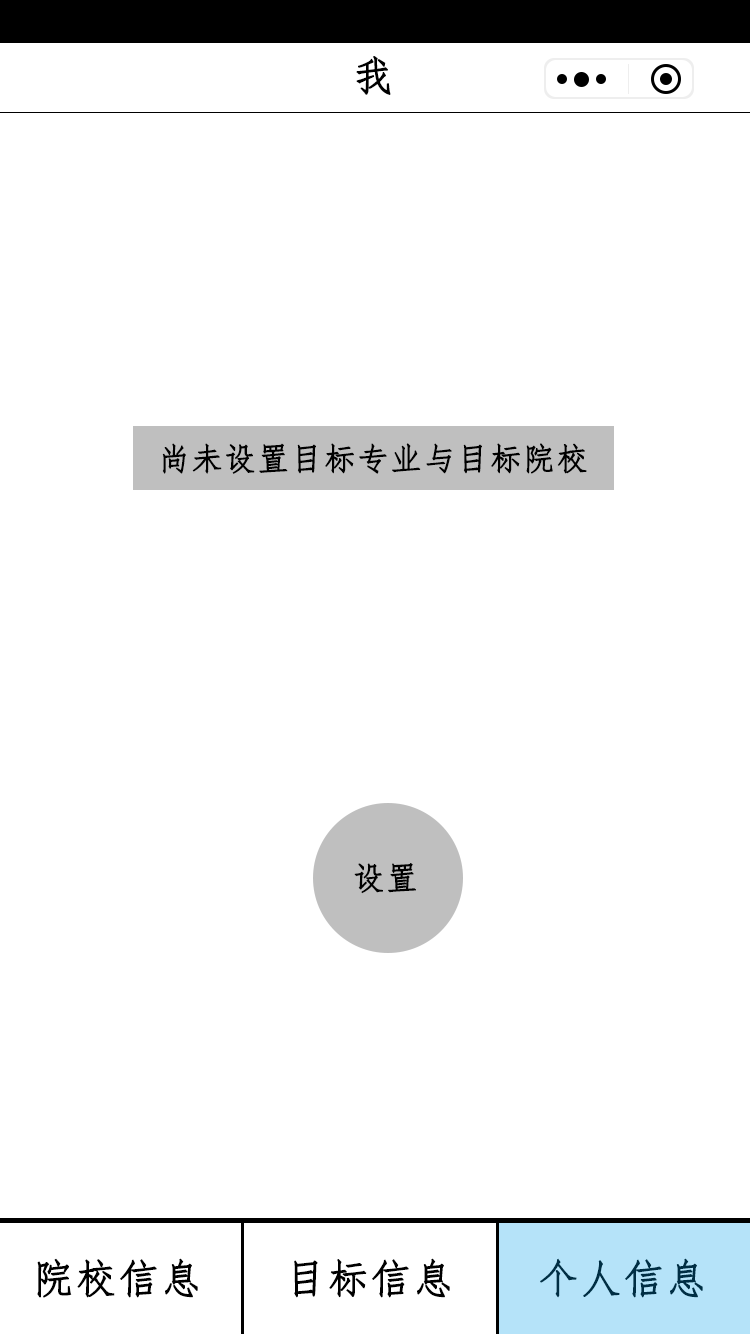
<style>
.page{position:relative;width:750px;height:1334px;background:#ffffff}
.page>*{position:absolute;margin:0}
.t1{font:40.7px "FangSong";letter-spacing:0.02em;color:#000000;font-weight:bold}
.t2{font:31.7px "FangSong";letter-spacing:0.02em;color:#000000;font-weight:bold}
.t3{font:40.7px "FangSong";letter-spacing:0.02em;color:#002e44;font-weight:bold}
</style>
<div class="page">
<p class="t1" style="left:356px;top:56px;width:35px;height:39px">我</p>
<p class="t2" style="left:162px;top:443px;width:425px;height:31px">尚未设置目标专业与目标院校</p>
<p class="t2" style="left:354px;top:863px;width:62px;height:31px">设置</p>
<p class="t1" style="left:37px;top:1258px;width:161px;height:40px">院校信息</p>
<p class="t1" style="left:294px;top:1258px;width:156px;height:40px">目标信息</p>
<p class="t3" style="left:540px;top:1258px;width:163px;height:40px">个人信息</p>
</div>
